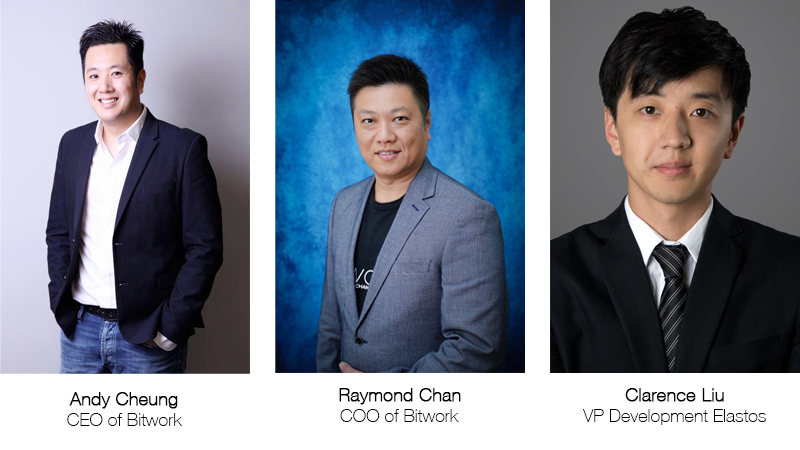
<style>
.page{position:relative;width:800px;height:450px;background:#ffffff}
.page>*{position:absolute;margin:0}
.t1{font:18px "HelveticaNeue-Thin";color:#000000}
.t2{font:18px "HelveticaNeue-Thin";color:#000000;font-weight:bold}
</style>
<div class="page">
<p class="t1" style="left:339px;top:388px;width:122px;height:34px;text-align:center"><span class="t2">Raymond Chan<br></span>COO of Bitwork</p>
<p class="t1" style="left:582px;top:388px;width:184px;height:37px;text-align:center"><span class="t2">Clarence Liu<br></span>VP Development Elastos</p>
<p class="t1" style="left:67px;top:392px;width:116px;height:34px;text-align:center"><span class="t2">Andy Cheung<br></span>CEO of Bitwork</p>
</div>
